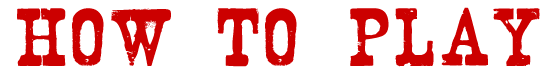
<style>
.page{position:relative;width:543px;height:81px;background:#ffffff}
.page>*{position:absolute;margin:0}
.t1{font:72px "Nashville";color:#cc0000;scale:1.67 1}
</style>
<div class="page">
<p class="t1" style="left:17px;top:7px;width:523px;height:60px">how to play</p>
</div>
